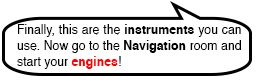
<style>
.page{position:relative;width:256px;height:80px;background:#ffffff}
.page>*{position:absolute;margin:0}
.t1{font:13px "Helvetica";color:#000000;scale:0.94 1}
.t2{font:13px "Helvetica-Bold";color:#000000;scale:0.94 1}
.t3{font:13px "Helvetica-Bold";color:#ff0000;scale:0.94 1}
</style>
<div class="page">
<p class="t1" style="left:17px;top:24px;width:224px;height:45px;text-align:justify">Finally, this are the <span class="t2">instruments </span>you can use. Now go to the <span class="t2">Navigation </span>room and start your <span class="t3">engines</span>!</p>
</div>
